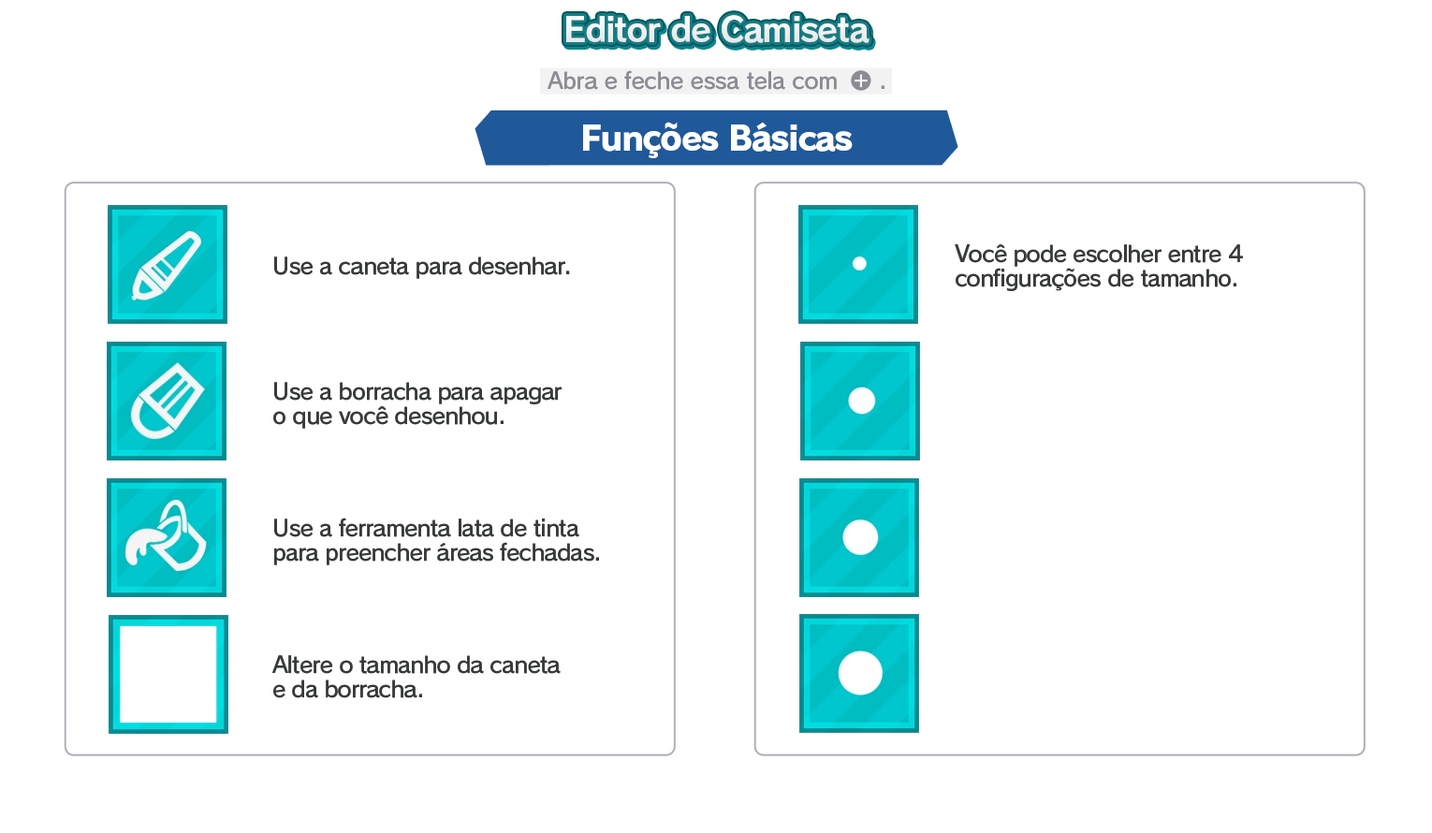
<style>
.page{position:relative;width:1432px;height:833px;background:#ffffff}
.page>*{position:absolute;margin:0}
.t1{font:33.7px "RodinPro-B";letter-spacing:-0.039em;color:#f0f0f1}
.t2{font:22.5px "RodinPro-DB";letter-spacing:-0.025em;color:#8c8b93}
.t3{font:33.7px "RodinPro-EB";letter-spacing:-0.048em;color:#ffffff}
.t4{font:22.5px/23.7px "RodinPro-DB";letter-spacing:-0.04em;color:#383a3a}
.t5{font:22.5px "RodinPro-DB";letter-spacing:-0.04em;color:#383a3a}
</style>
<div class="page">
<p class="t1" style="left:566px;top:15px;width:303px;height:28px">Editor de Camiseta</p>
<p class="t2" style="left:547px;top:70px;width:290px;height:20px">Abra e feche essa tela com</p>
<p class="t2" style="left:881px;top:85px;width:3px;height:4px">.</p>
<p class="t3" style="left:583px;top:122px;width:270px;height:36px">Funções Básicas</p>
<p class="t4" style="left:955px;top:244px;width:288px;height:47px">Você pode escolher entre 4<br>configurações de tamanho.</p>
<p class="t5" style="left:274px;top:256px;width:296px;height:23px">Use a caneta para desenhar.</p>
<p class="t4" style="left:273px;top:382px;width:289px;height:47px">Use a borracha para apagar<br>o que você desenhou.</p>
<p class="t4" style="left:274px;top:517px;width:325px;height:48px">Use a ferramenta lata de tinta<br>para preencher áreas fechadas.</p>
<p class="t4" style="left:272px;top:655px;width:289px;height:43px">Altere o tamanho da caneta<br>e da borracha.</p>
</div>
